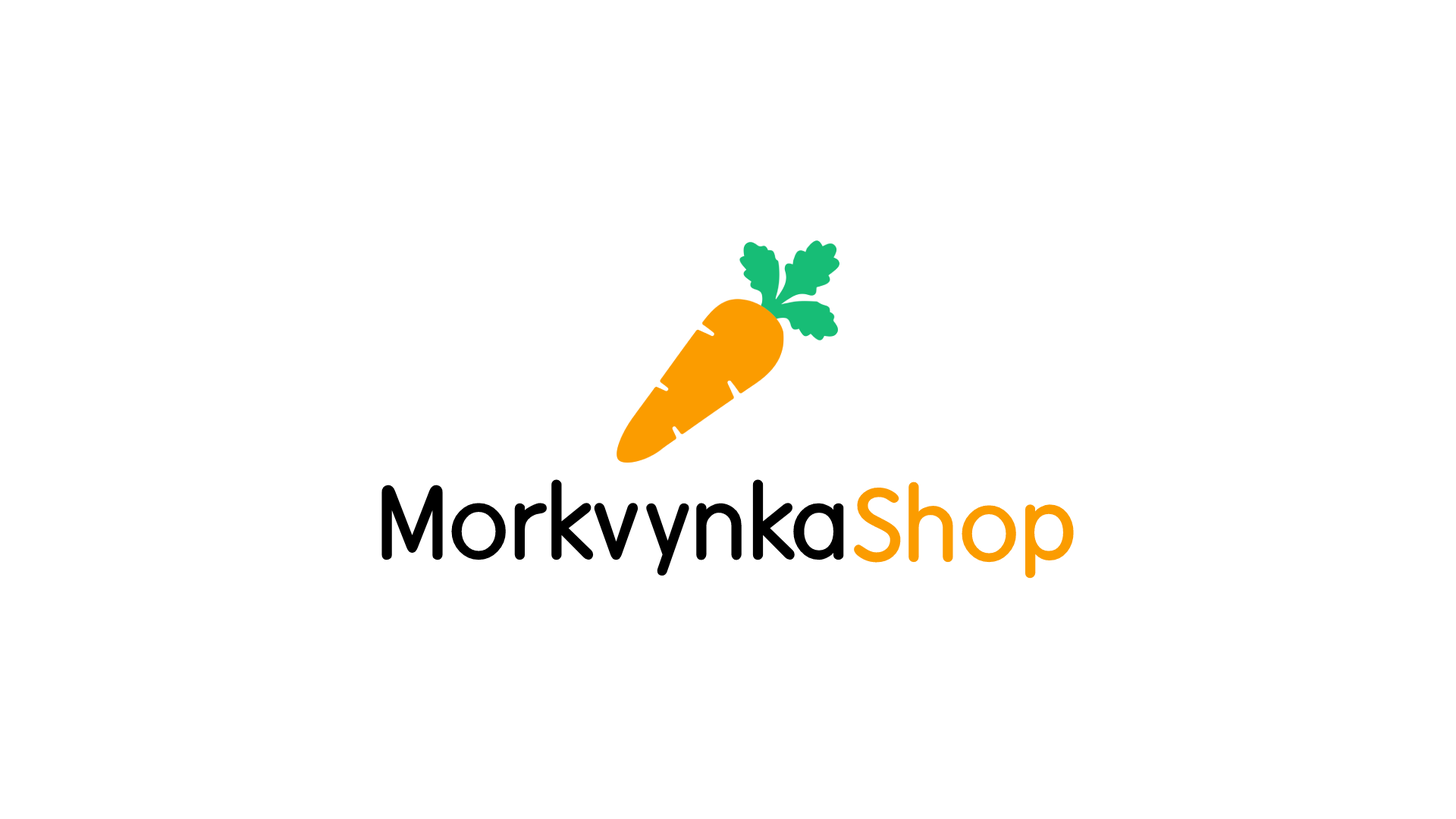
<style>
.page{position:relative;width:1456px;height:819px;background:#ffffff}
.page>*{position:absolute;margin:0}
.t1{font:100.6px "DXLBaB-KSCpc-EUC-H";color:#000000}
.t2{font:100.6px "DXLBaB-KSCpc-EUC-H";color:#fb9c00}
</style>
<div class="page">
<p class="t1" style="left:381px;top:479px;width:463px;height:97px">Morkvynka</p>
<p class="t2" style="left:853px;top:482px;width:221px;height:97px">Shop</p>
</div>
